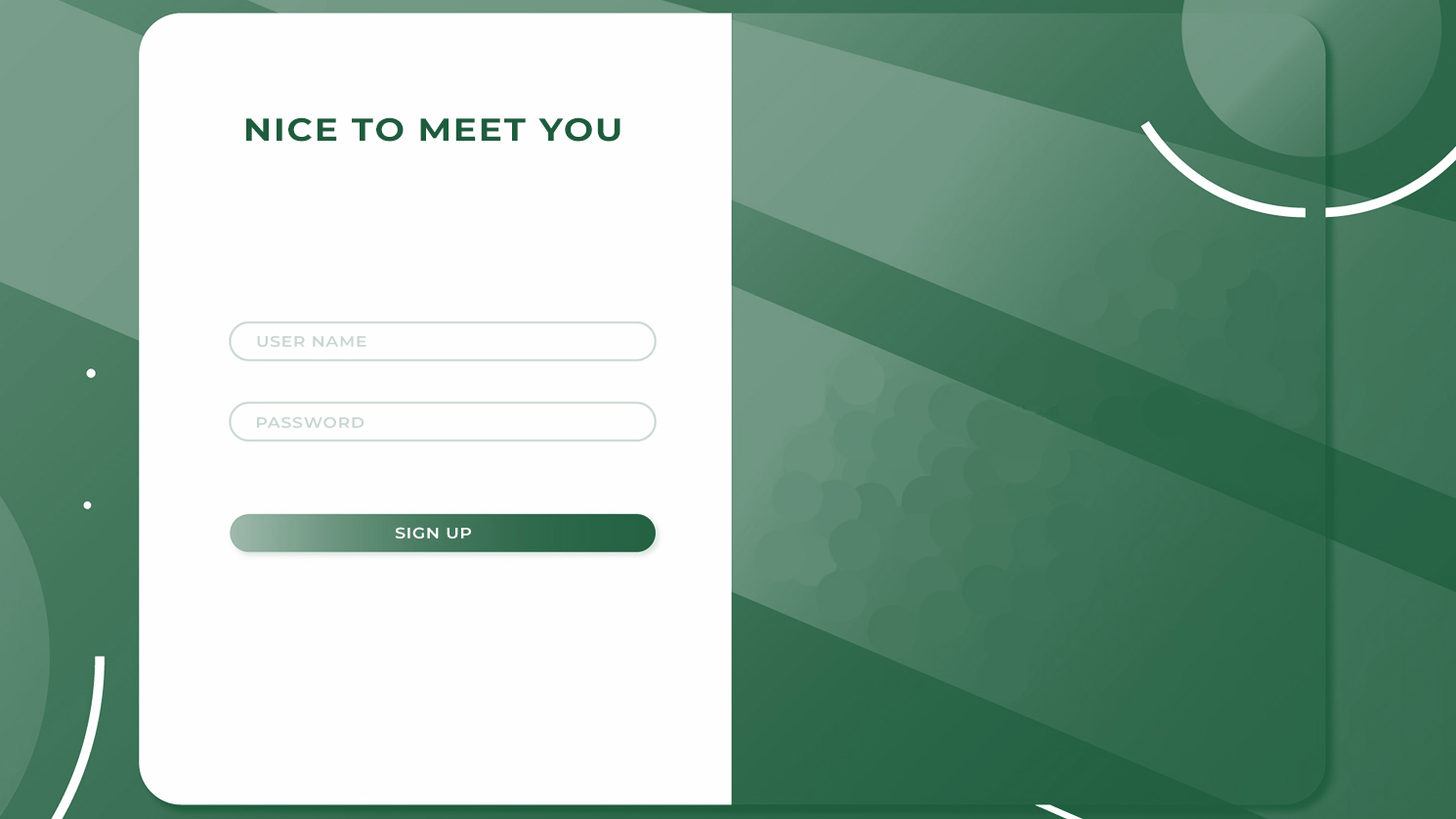
<style>
.page{position:relative;width:1456px;height:819px;background:#fefefe}
.page>*{position:absolute;margin:0}
.t1{font:31.7px "Montserrat-Bold";letter-spacing:0.05em;color:#1d5c3d;scale:1.11 1}
.t2{font:15px "Montserrat-SemiBold";letter-spacing:0.05em;color:#c8d6d0;scale:1.11 1}
.t3{font:15px "Montserrat-SemiBold";letter-spacing:0.05em;color:#ffffff;scale:1.11 1}
</style>
<div class="page">
<p class="t1" style="left:246px;top:117px;width:375px;height:25px">NICE TO MEET YOU</p>
<p class="t2" style="left:257px;top:335px;width:109px;height:12px">USER NAME</p>
<p class="t2" style="left:257px;top:416px;width:108px;height:12px">PASSWORD</p>
<p class="t3" style="left:395px;top:527px;width:76px;height:11px">SIGN UP</p>
</div>
